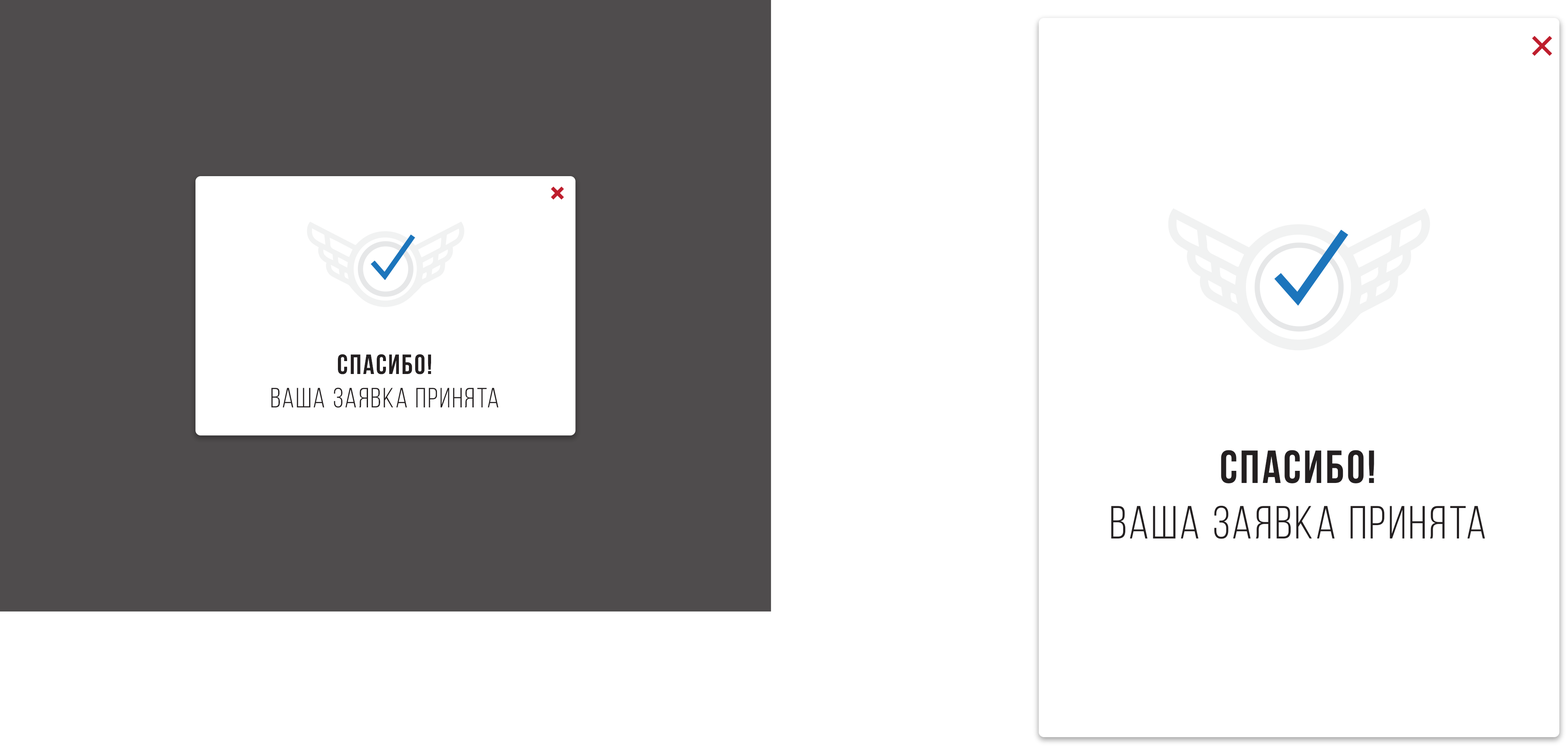
<style>
.page{position:relative;width:1568px;height:748px;background:#ffffff}
.page>*{position:absolute;margin:0}
.t1{font:27.8px "BebasNeueBook";letter-spacing:0.06em;color:#231f20}
.t2{font:27.8px "BebasNeueBold";letter-spacing:0.06em;color:#231f20}
.t3{font:46.3px "BebasNeueBook";letter-spacing:0.06em;color:#231f20}
.t4{font:46.3px "BebasNeueBold";letter-spacing:0.06em;color:#231f20}
</style>
<div class="page">
<p class="t1" style="left:271px;top:354px;width:227px;height:54px;text-align:center"><span class="t2">Спасибо!<br></span>Ваша заявка принята</p>
<p class="t3" style="left:1111px;top:450px;width:374px;height:89px;text-align:center"><span class="t4">Спасибо!<br></span>Ваша заявка принята</p>
</div>
